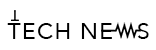
<style>
.page{position:relative;width:156px;height:50px;background:#ffffff}
.page>*{position:absolute;margin:0}
.t1{font:23.1px "Avenir-Roman";letter-spacing:0.05em;color:#000000}
</style>
<div class="page">
<p class="t1" style="left:7px;top:23px;width:142px;height:16px">TECH NE   S</p>
</div>
